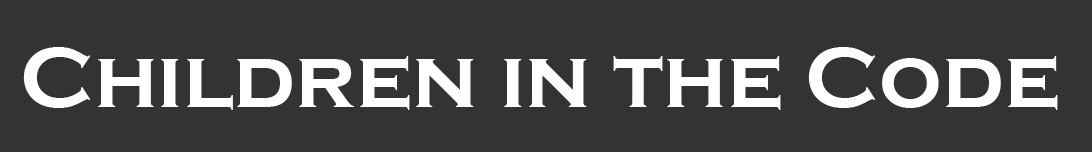
<style>
.page{position:relative;width:1092px;height:152px;background:#333333}
.page>*{position:absolute;margin:0}
.t1{font:88px "CopperplateGothic-Bold";color:#ffffff}
</style>
<div class="page">
<p class="t1" style="left:23px;top:47px;width:1035px;height:63px">Children in the Code</p>
</div>
